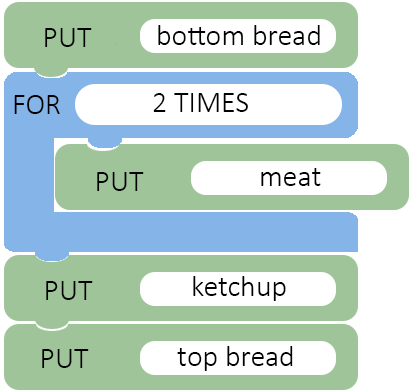
<style>
.page{position:relative;width:409px;height:390px;background:#a0c49a}
.page>*{position:absolute;margin:0}
.t1{font:30px "Calibri-Light";color:#000000}
</style>
<div class="page">
<p class="t1" style="left:45px;top:28px;width:47px;height:19px">PUT</p>
<p class="t1" style="left:158px;top:25px;width:162px;height:20px">bottom bread</p>
<p class="t1" style="left:14px;top:95px;width:46px;height:19px">FOR</p>
<p class="t1" style="left:153px;top:93px;width:95px;height:19px">2 TIMES</p>
<p class="t1" style="left:97px;top:172px;width:47px;height:19px">PUT</p>
<p class="t1" style="left:261px;top:168px;width:60px;height:18px">meat</p>
<p class="t1" style="left:46px;top:281px;width:47px;height:19px">PUT</p>
<p class="t1" style="left:193px;top:276px;width:93px;height:25px">ketchup</p>
<p class="t1" style="left:42px;top:349px;width:47px;height:19px">PUT</p>
<p class="t1" style="left:177px;top:346px;width:116px;height:25px">top bread</p>
</div>
